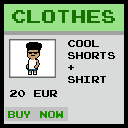
<style>
.page{position:relative;width:128px;height:128px;background:#d9dada}
.page>*{position:absolute;margin:0}
.t1{font:18px "JoystixMonospace-Regular";color:#157200}
.t2{font:10px "JoystixMonospace-Regular";color:#000000}
.t3{font:10px "JoystixMonospace-Regular";color:#1b9100}
</style>
<div class="page">
<p class="t1" style="left:12px;top:10px;width:103px;height:13px">Clothes</p>
<p class="t2" style="left:68px;top:40px;width:47px;height:43px">Cool<br>Shorts<br>+<br>shirt</p>
<p class="t2" style="left:10px;top:90px;width:47px;height:7px">20 EUR</p>
<p class="t3" style="left:8px;top:111px;width:55px;height:7px">BUY NOW</p>
</div>
